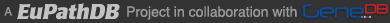
<style>
.page{position:relative;width:390px;height:23px;background:#333333}
.page>*{position:absolute;margin:0}
.t1{font:20.9px "PopplLaudatio-Bold";color:#c3c3c3;font-style:italic}
.t2{font:14.3px "Helvetica";color:#9a9a9a}
.t3{font:12px "Helvetica";color:#9a9a9a}
</style>
<div class="page">
<p class="t1" style="left:17px;top:3px;width:103px;height:17px">EuPathDB</p>
<p class="t2" style="left:127px;top:6px;width:170px;height:14px">Project in collaboration with</p>
<p class="t3" style="left:4px;top:7px;width:8px;height:9px">A</p>
</div>
